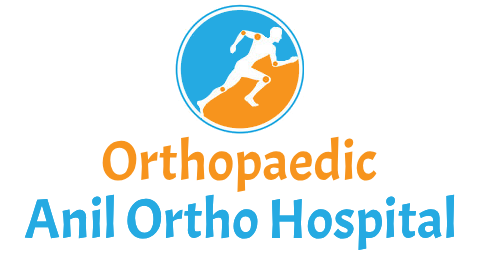
<style>
.page{position:relative;width:480px;height:255px;background:#ffffff}
.page>*{position:absolute;margin:0}
.t1{font:56px "Acme-Regular";color:#f7941d}
.t2{font:56px "Acme-Regular";color:#25aae2}
</style>
<div class="page">
<p class="t1" style="left:102px;top:136px;width:275px;height:56px">Orthopaedic</p>
<p class="t2" style="left:24px;top:194px;width:431px;height:56px">Anil Ortho Hospital</p>
<p class="t2" style="left:24px;top:194px;width:431px;height:56px">Anil Ortho Hospital</p>
</div>
